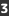
<style>
.page{position:relative;width:9px;height:16px;background:#333333}
.page>*{position:absolute;margin:0}
.t1{font:12.5px "RoundedMplus1c-ExtraBold";color:#ffffff}
</style>
<div class="page">
<p class="t1" style="left:1px;top:3px;width:7px;height:11px">3</p>
</div>
